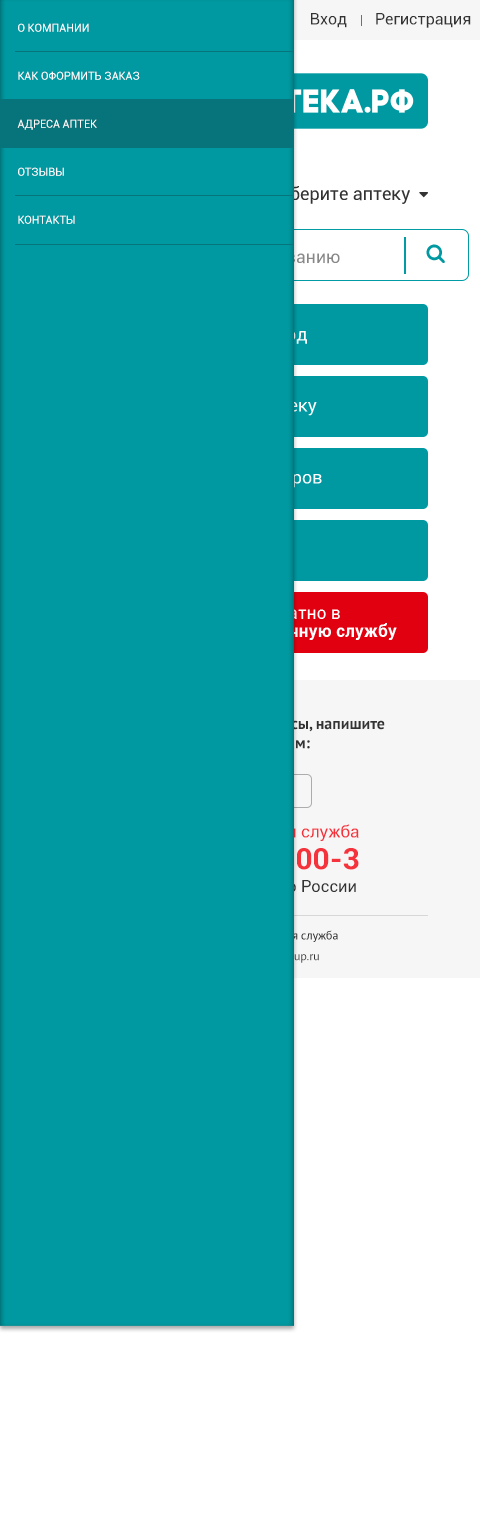
<style>
.page{position:relative;width:480px;height:1531px;background:#0099a1}
.page>*{position:absolute;margin:0}
.t1{font:16px "Roboto-Regular";color:#333333}
.t2{font:11px/48px "Roboto-Regular";color:#ffffff;text-transform:uppercase}
.t3{font:16px "PTSans-Bold";color:#0099a1}
.t4{font:17.3px "Roboto-Regular";color:#0099a1}
.t5{font:29.5px "Roboto-Bold";color:#0099a1;text-transform:uppercase}
.t6{font:16.5px "Roboto-Regular";color:#0099a1}
</style>
<div class="page">
<p class="t1" style="left:311px;top:13px;width:160px;height:15px">Вход       Регистрация</p>
<p class="t2" style="left:17px;top:23px;width:123px;height:201px">О компании<br>Как оформить заказ<br>Адреса аптек<br>Отзывы<br>Контакты</p>
<p class="t3" style="left:98px;top:717px;width:287px;height:32px;text-align:center">Если у вас появились вопросы, напишите<br>или позвоните нам:</p>
<p class="t4" style="left:120px;top:824px;width:239px;height:17px">Аптечная справочная служба</p>
<p class="t5" style="left:121px;top:848px;width:238px;height:22px">8-800-100-000-3</p>
<p class="t6" style="left:120px;top:879px;width:236px;height:14px">бесплатный звонок по России</p>
</div>
